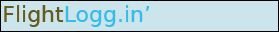
<style>
.page{position:relative;width:279px;height:32px;background:#cce4eb}
.page>*{position:absolute;margin:0}
.t1{font:22px "BitstreamVeraSans-Roman";color:#35bce8}
.t2{font:22px "BitstreamVeraSans-Roman";color:#665b1e}
</style>
<div class="page">
<p class="t1" style="left:4px;top:5px;width:146px;height:22px"><span class="t2">Flight</span>Logg.in’</p>
</div>
